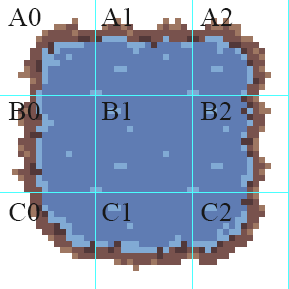
<style>
.page{position:relative;width:289px;height:289px;background:#5f7cb3}
.page>*{position:absolute;margin:0}
.t1{font:26.7px "TimesNewRomanPSMT";color:#181818;scale:1.03 1}
</style>
<div class="page">
<p class="t1" style="left:8px;top:8px;width:33px;height:18px">A0</p>
<p class="t1" style="left:101px;top:8px;width:31px;height:18px">A1</p>
<p class="t1" style="left:200px;top:8px;width:33px;height:18px">A2</p>
<p class="t1" style="left:8px;top:102px;width:32px;height:18px">B0</p>
<p class="t1" style="left:101px;top:102px;width:30px;height:18px">B1</p>
<p class="t1" style="left:200px;top:102px;width:32px;height:18px">B2</p>
<p class="t1" style="left:9px;top:203px;width:31px;height:18px">C0</p>
<p class="t1" style="left:102px;top:203px;width:29px;height:18px">C1</p>
<p class="t1" style="left:201px;top:203px;width:31px;height:18px">C2</p>
</div>
